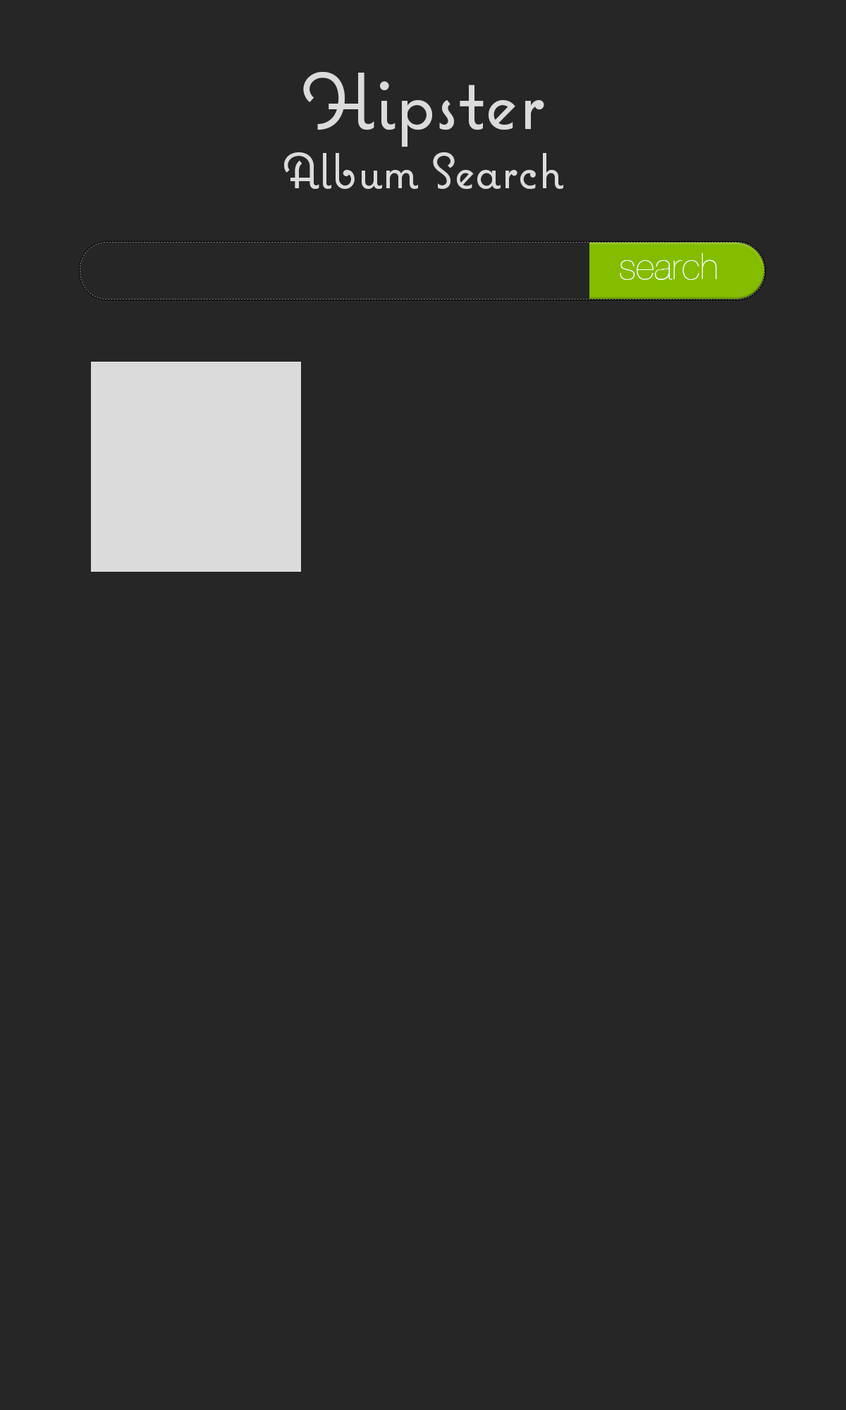
<style>
.page{position:relative;width:846px;height:1410px;background:#262626}
.page>*{position:absolute;margin:0}
.t1{font:49.3px "Coquette";color:#dbdbdb}
.t2{font:78.9px "Coquette";color:#dbdbdb}
.t3{font:36.7px "HelveticaNeue-UltraLight";color:#ffffff}
</style>
<div class="page">
<p class="t1" style="left:284px;top:72px;width:279px;height:117px;text-align:center"><span class="t2">Hipster<br></span>Album Search</p>
<p class="t3" style="left:620px;top:253px;width:97px;height:27px">search</p>
</div>
